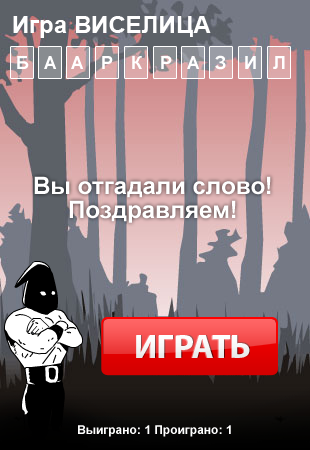
<style>
.page{position:relative;width:310px;height:450px}
.page>*{position:absolute;margin:0}
.t1{font:24px "Arial-BoldMT";color:#ffffff}
.t2{font:18px "Arial-BoldMT";color:#ffffff}
.t3{font:24px/24px "Arial-BoldMT";color:#ffffff}
.t4{font:34px "MyriadPro-Bold";color:#ffffff}
.t5{font:12px "Arial-BoldMT";color:#ffffff}
</style>
<div class="page">
<p class="t1" style="left:13px;top:16px;width:198px;height:22px">Игра ВИСЕЛИЦА</p>
<p class="t2" style="left:17px;top:56px;width:12px;height:13px">Б</p>
<p class="t2" style="left:44px;top:56px;width:13px;height:13px">А</p>
<p class="t2" style="left:71px;top:56px;width:13px;height:13px">А</p>
<p class="t2" style="left:102px;top:56px;width:11px;height:13px">Р</p>
<p class="t2" style="left:132px;top:56px;width:10px;height:13px">К</p>
<p class="t2" style="left:161px;top:56px;width:11px;height:13px">Р</p>
<p class="t2" style="left:187px;top:56px;width:13px;height:13px">А</p>
<p class="t2" style="left:215px;top:55px;width:11px;height:15px">З</p>
<p class="t2" style="left:245px;top:56px;width:11px;height:13px">И</p>
<p class="t2" style="left:273px;top:56px;width:12px;height:13px">Л</p>
<p class="t3" style="left:34px;top:176px;width:237px;height:47px;text-align:center">Вы отгадали слово!<br>Поздравляем!</p>
<p class="t4" style="left:136px;top:335px;width:114px;height:23px">ИГРАТЬ</p>
<p class="t5" style="left:78px;top:425px;width:153px;height:12px">Выиграно: 1 Проиграно: 1</p>
</div>
